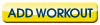
<style>
.page{position:relative;width:100px;height:25px}
.page>*{position:absolute;margin:0}
.t1{font:12.2px "AvantGardeGothicC-Bold";letter-spacing:-0.02em;color:#023c62}
</style>
<div class="page">
<p class="t1" style="left:7px;top:8px;width:86px;height:10px">ADD WORKOUT</p>
</div>
